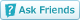
<style>
.page{position:relative;width:80px;height:20px}
.page>*{position:absolute;margin:0}
.t1{font:9.7px "Meiryo-Bold";color:#2199ac;scale:0.93 1}
</style>
<div class="page">
<p class="t1" style="left:18px;top:6px;width:57px;height:8px">Ask Friends</p>
</div>
